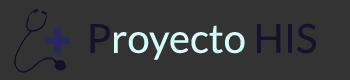
<style>
.page{position:relative;width:350px;height:80px;background:#333333}
.page>*{position:absolute;margin:0}
.t1{font:40px "Lato-Regular";color:#d4fffc}
.t2{font:40px "Lato-Regular";color:#16112c}
</style>
<div class="page">
<p class="t1" style="left:90px;top:23px;width:226px;height:37px"><span class="t2">P</span>royecto <span class="t2">HIS</span></p>
</div>
